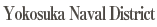
<style>
.page{position:relative;width:157px;height:27px;background:#ffffff}
.page>*{position:absolute;margin:0}
.t1{font:18px "RyuminPro-ExBold";letter-spacing:-0.08em;color:#4c4843;scale:0.85 1}
</style>
<div class="page">
<p class="t1" style="left:3px;top:6px;width:153px;height:15px">Yokosuka Naval District</p>
</div>
